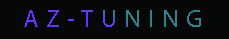
<style>
.page{position:relative;width:229px;height:39px;background:#060808}
.page>*{position:absolute;margin:0}
.t1{font:25px "MyriadPro-Regular";letter-spacing:0.3em}
</style>
<div class="page">
<p class="t1" style="left:24px;top:10px;width:177px;height:17px">AZ-TUNING</p>
</div>
